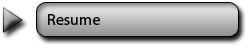
<style>
.page{position:relative;width:250px;height:50px;background:#ffffff}
.page>*{position:absolute;margin:0}
.t1{font:16px "MyriadPro-Regular";color:#000000}
</style>
<div class="page">
<p class="t1" style="left:48px;top:14px;width:52px;height:11px">Resume</p>
</div>
